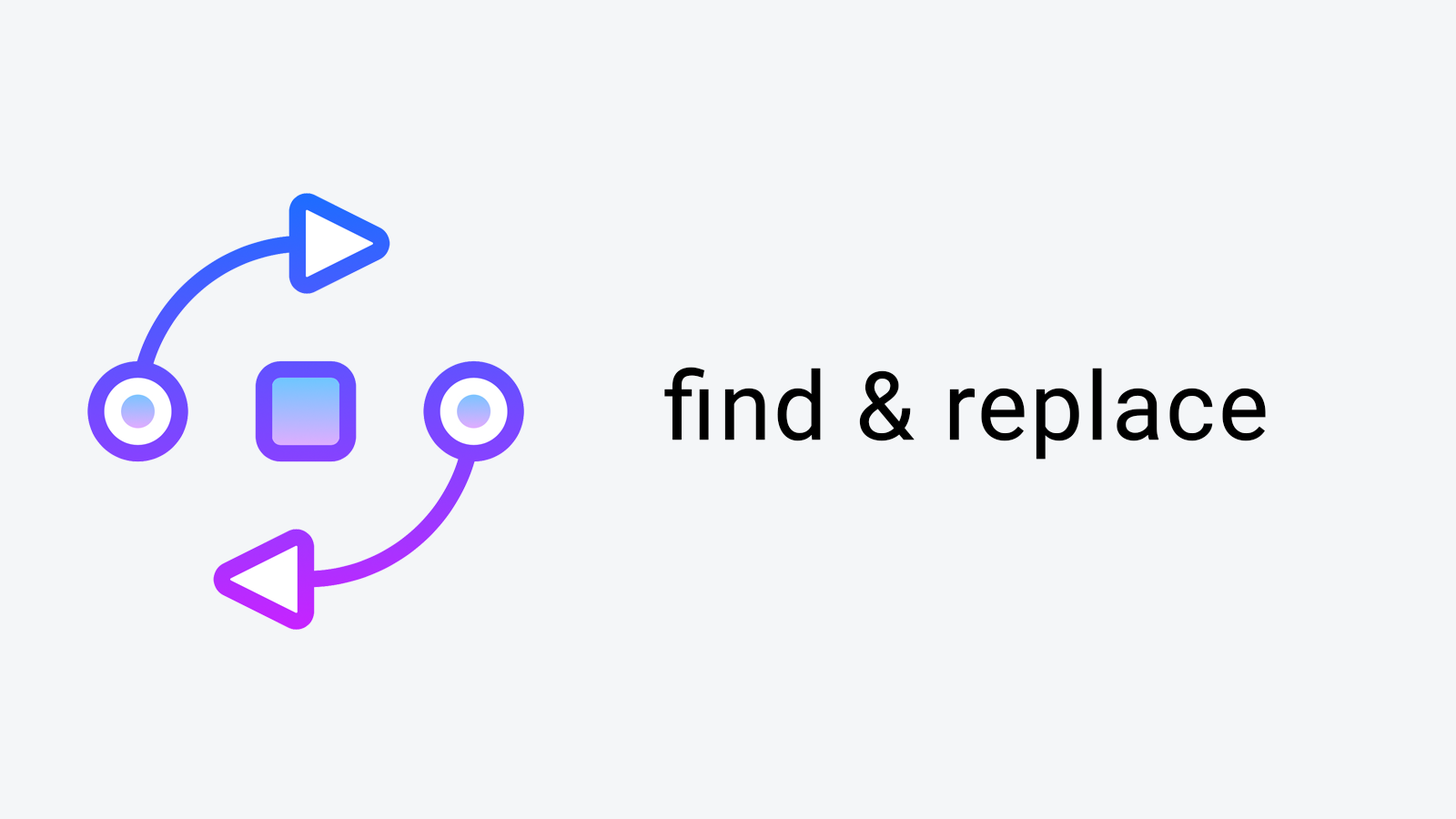
<style>
.page{position:relative;width:1456px;height:819px;background:#f4f6f8}
.page>*{position:absolute;margin:0}
.t1{font:95px "Roboto-Regular";color:#000000;font-weight:bold}
</style>
<div class="page">
<p class="t1" style="left:664px;top:367px;width:602px;height:93px">find &amp; replace</p>
</div>
